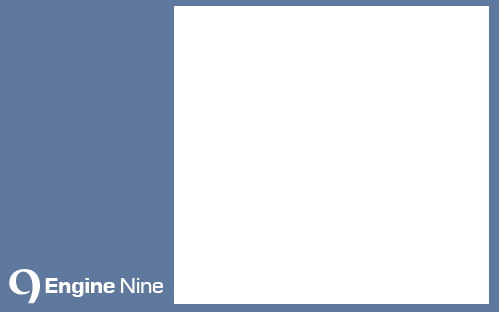
<style>
.page{position:relative;width:499px;height:312px;background:#ffffff}
.page>*{position:absolute;margin:0}
.t1{font:21.4px "Moire-Bold";letter-spacing:-0.05em;color:#ffffff}
.t2{font:21.4px "Moire";letter-spacing:-0.05em;color:#ffffff}
</style>
<div class="page">
<p class="t1" style="left:45px;top:278px;width:118px;height:19px">Engine <span class="t2">Nine</span></p>
</div>
